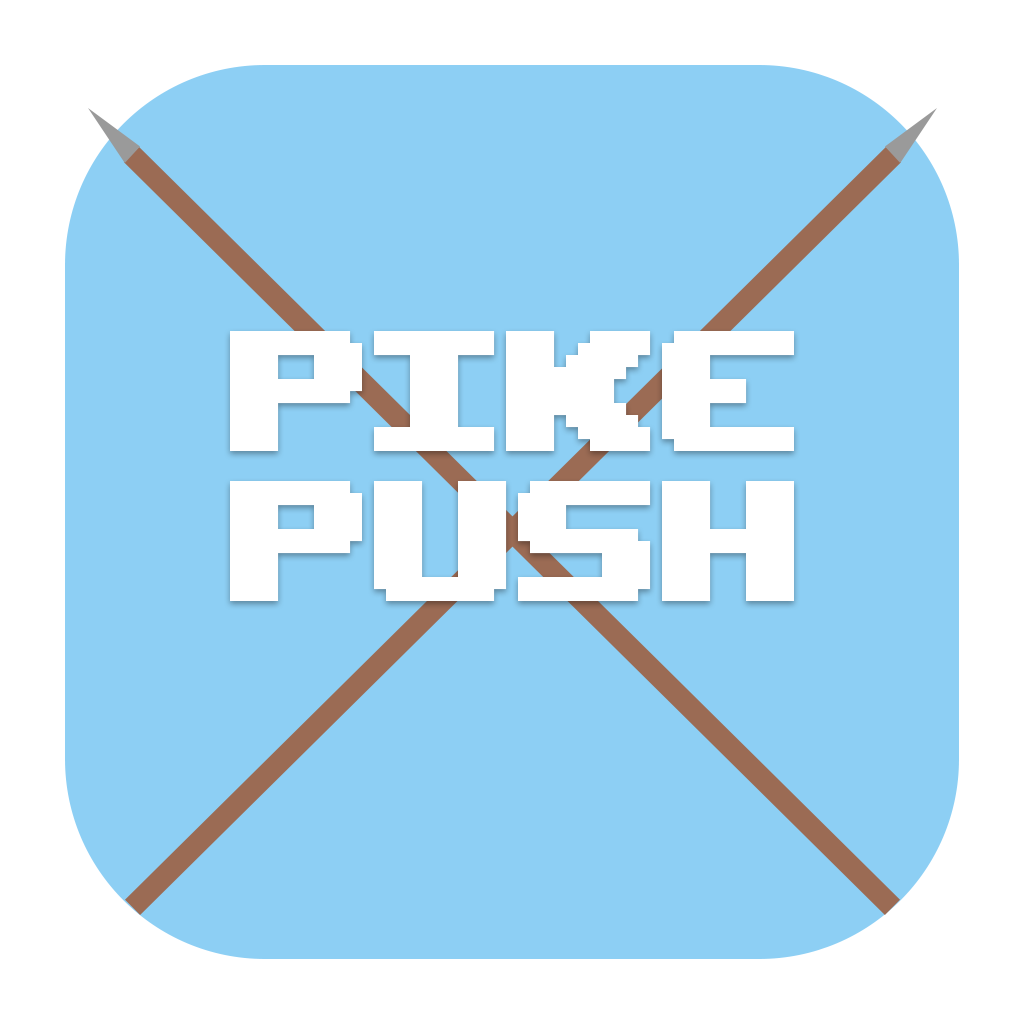
<style>
.page{position:relative;width:1024px;height:1024px;background:#8dcff4}
.page>*{position:absolute;margin:0}
.t1{font:240px/150px "UpheavalTT-BRK-";color:#ffffff}
</style>
<div class="page">
<p class="t1" style="left:230px;top:331px;width:564px;height:270px">PIKE<br>PUSH</p>
</div>
